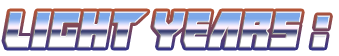
<style>
.page{position:relative;width:339px;height:56px;background:#ffffff}
.page>*{position:absolute;margin:0}
.t1{font:50.8px "Ifinkufreeky";letter-spacing:0.01em;font-style:italic}
</style>
<div class="page">
<p class="t1" style="left:4px;top:11px;width:326px;height:37px">light years :</p>
</div>
